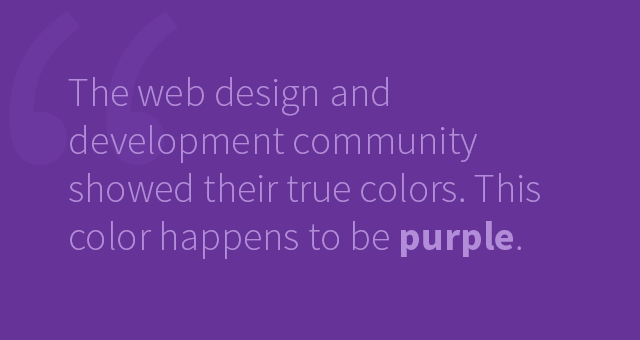
<style>
.page{position:relative;width:640px;height:340px;background:#663399}
.page>*{position:absolute;margin:0}
.t1{font:40px "SourceSansPro-Light";color:#b28cd9}
.t2{font:40px "SourceSansPro-Bold";color:#b28cd9}
</style>
<div class="page">
<p class="t1" style="left:68px;top:77px;width:472px;height:182px">The web design and development community showed their true colors. This color happens to be <span class="t2">purple</span>.</p>
</div>
